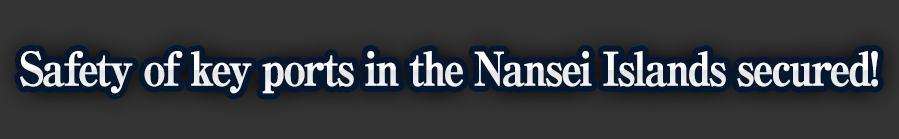
<style>
.page{position:relative;width:899px;height:139px;background:#333333}
.page>*{position:absolute;margin:0}
.t1{font:46px "RyuminPro-ExBold";letter-spacing:-0.08em;color:#ffffff;font-weight:bold;scale:0.9 1}
</style>
<div class="page">
<p class="t1" style="left:20px;top:51px;width:858px;height:43px">Safety of key ports in the Nansei Islands secured!</p>
</div>
